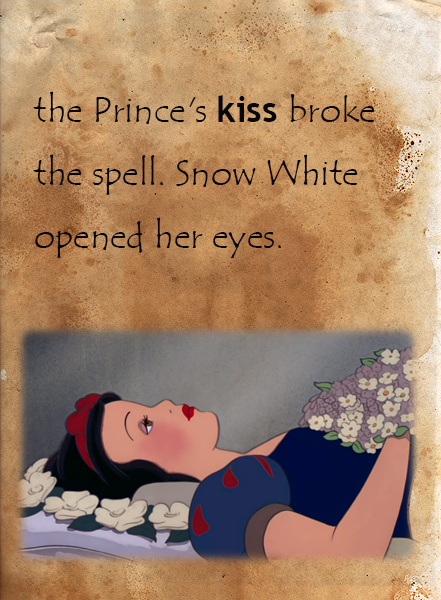
<style>
.page{position:relative;width:441px;height:600px}
.page>*{position:absolute;margin:0}
.t1{font:36px "TempusSansITC";color:#070707}
.t2{font:36px "TrebuchetMS-Bold";color:#070707}
</style>
<div class="page">
<p class="t1" style="left:33px;top:91px;width:342px;height:167px">the Prince's <span class="t2">kiss </span>broke<br> the spell. Snow White <br> opened her eyes.</p>
</div>
